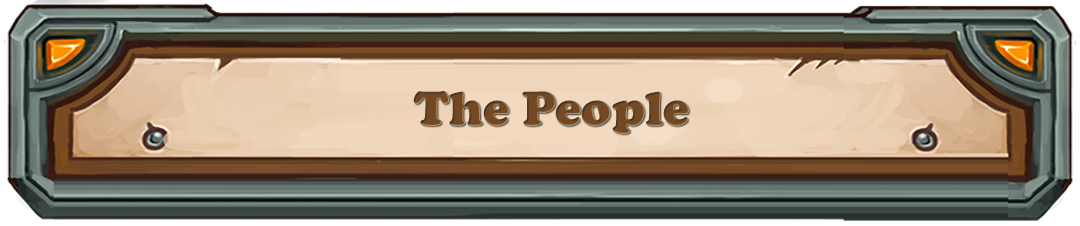
<style>
.page{position:relative;width:1080px;height:226px}
.page>*{position:absolute;margin:0}
.t1{font:50px "CooperBlack";color:#744822}
</style>
<div class="page">
<p class="t1" style="left:413px;top:91px;width:276px;height:43px">The People</p>
</div>
